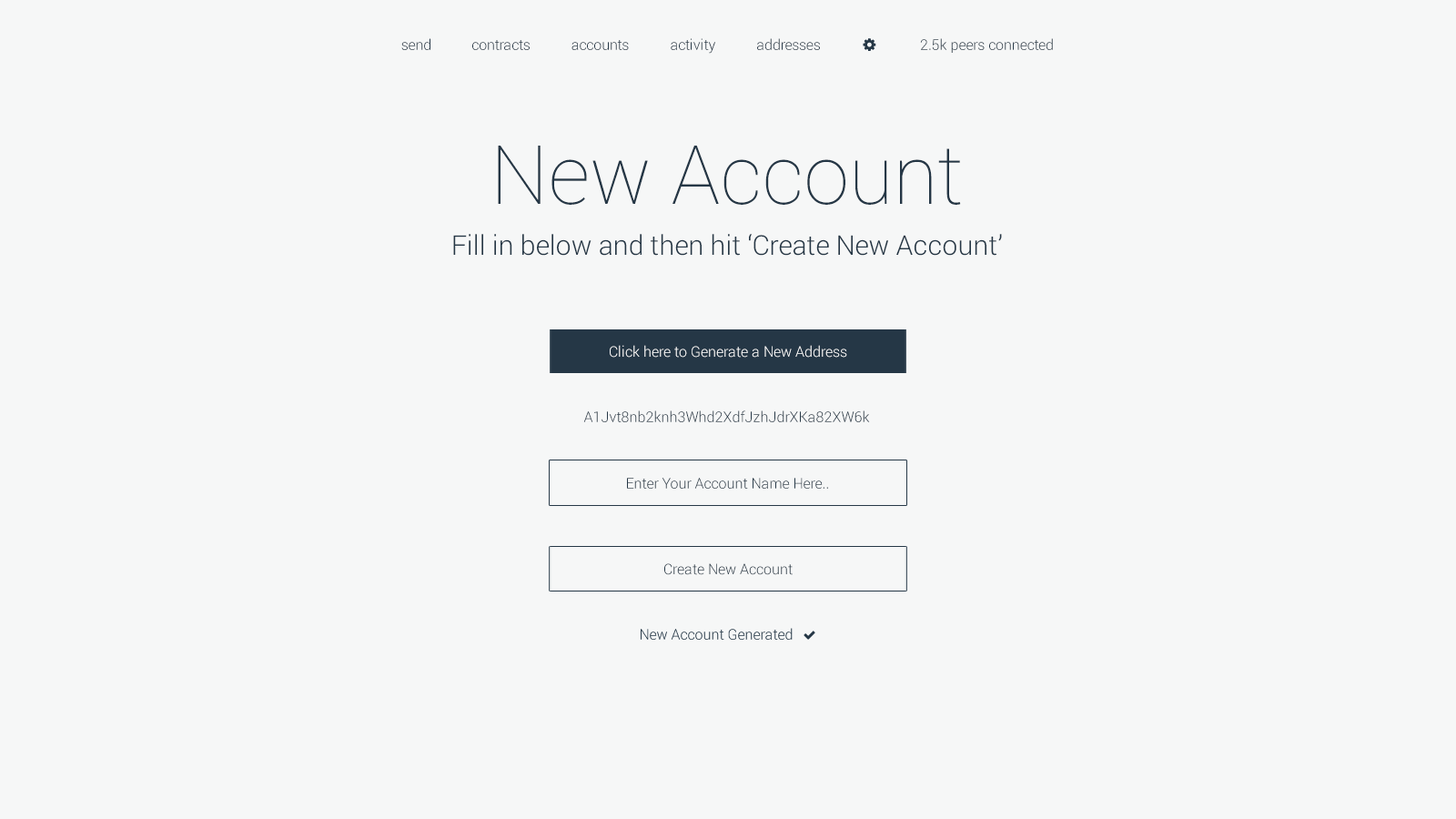
<style>
.page{position:relative;width:1456px;height:819px;background:#f6f7f7}
.page>*{position:absolute;margin:0}
.t1{font:14.6px "Roboto-Light";color:#253746}
.t2{font:81.9px "Roboto-Thin";color:#253746}
.t3{font:27.3px "Roboto-Light";color:#253746}
.t4{font:14.6px "Roboto-Light";color:#ffffff}
</style>
<div class="page">
<p class="t1" style="left:401px;top:38px;width:29px;height:12px">send</p>
<p class="t1" style="left:472px;top:40px;width:58px;height:10px">contracts</p>
<p class="t1" style="left:571px;top:40px;width:58px;height:10px">accounts</p>
<p class="t1" style="left:671px;top:38px;width:44px;height:16px">activity</p>
<p class="t1" style="left:757px;top:38px;width:63px;height:12px">addresses</p>
<p class="t1" style="left:920px;top:38px;width:133px;height:15px">2.5k peers connected</p>
<p class="t2" style="left:498px;top:146px;width:463px;height:59px">New Account</p>
<p class="t3" style="left:453px;top:234px;width:549px;height:22px">Fill in below and then hit ‘Create New Account’</p>
<p class="t4" style="left:610px;top:345px;width:237px;height:13px">Click here to Generate a New Address</p>
<p class="t1" style="left:583px;top:410px;width:287px;height:12px">A1Jvt8nb2knh3Whd2XdfJzhJdrXKa82XW6k</p>
<p class="t1" style="left:627px;top:478px;width:201px;height:11px">Enter Your Account Name Here..</p>
<p class="t1" style="left:664px;top:563px;width:129px;height:12px">Create New Account</p>
</div>
